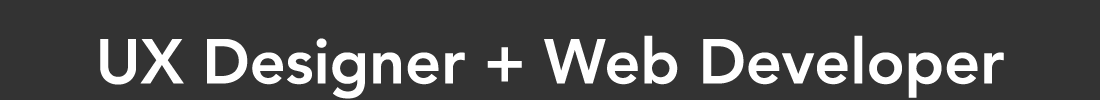
<style>
.page{position:relative;width:1100px;height:100px;background:#333333}
.page>*{position:absolute;margin:0}
.t1{font:62.6px "Avenir-Heavy";color:#ffffff}
</style>
<div class="page">
<p class="t1" style="left:100px;top:35px;width:904px;height:64px">UX Designer + Web Developer</p>
</div>
